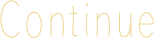
<style>
.page{position:relative;width:154px;height:38px;background:#ffffff}
.page>*{position:absolute;margin:0}
.t1{font:50px "AvenirCondensedHand";color:#eed694}
</style>
<div class="page">
<p class="t1" style="left:0px;top:0px;width:154px;height:38px">Continue</p>
</div>
